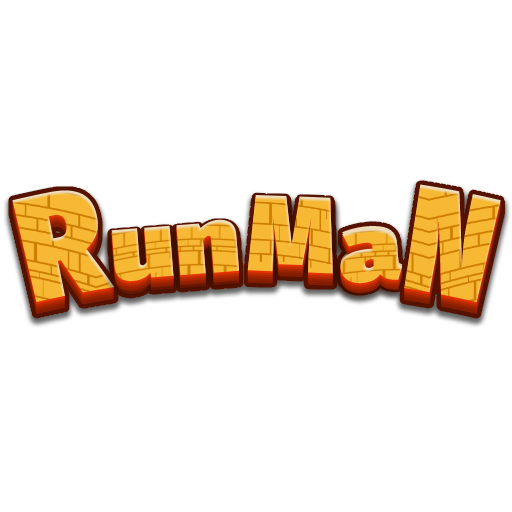
<style>
.page{position:relative;width:512px;height:512px;background:#ffffff}
.page>*{position:absolute;margin:0}
.t1{font:108.3px "FiraSans-Ultra";color:#f7b934}
.t2{font:93.7px "FiraSans-Ultra";scale:1.22 1}
</style>
<div class="page">
<p class="t1" style="left:247px;top:197px;width:86px;height:79px;rotate:2deg">M</p>
<p class="t1" style="left:247px;top:195px;width:86px;height:79px;rotate:2deg">M</p>
<p class="t2" style="left:111px;top:221px;width:129px;height:64px;rotate:-4deg">un</p>
<p class="t2" style="left:111px;top:219px;width:129px;height:64px;rotate:-4deg">un</p>
<p class="t2" style="left:339px;top:224px;width:64px;height:59px;rotate:-4deg">a</p>
<p class="t2" style="left:339px;top:226px;width:64px;height:59px;rotate:-4deg">a</p>
</div>
